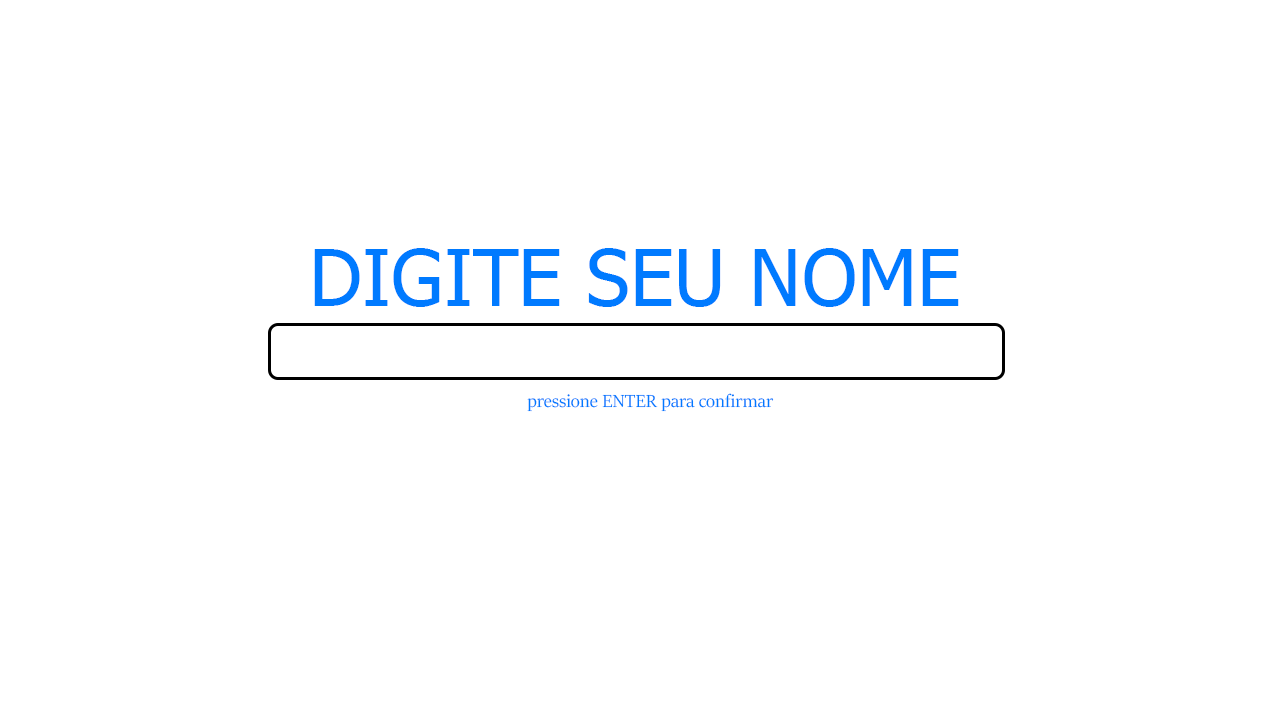
<style>
.page{position:relative;width:1280px;height:720px;background:#ffffff}
.page>*{position:absolute;margin:0}
.t1{font:78.3px "Tahoma";color:#007aff}
.t2{font:19.6px "SitkaBanner";color:#007aff}
</style>
<div class="page">
<p class="t1" style="left:314px;top:248px;width:645px;height:59px">DIGITE SEU NOME</p>
<p class="t2" style="left:527px;top:393px;width:247px;height:19px">pressione ENTER para confirmar</p>
</div>
